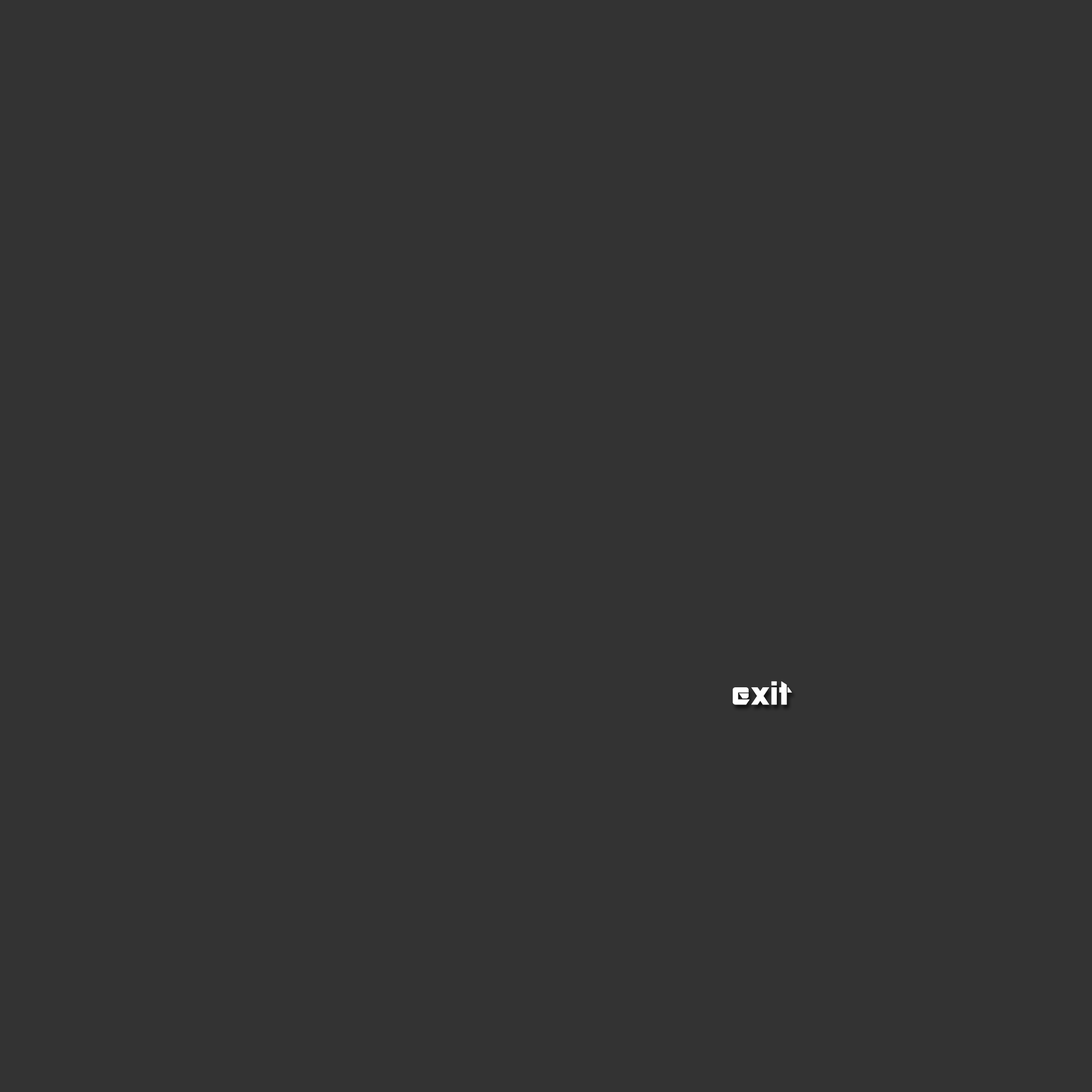
<style>
.page{position:relative;width:1092px;height:1092px;background:#333333}
.page>*{position:absolute;margin:0}
.t1{font:32px "ARDESTINE";color:#ffffff;scale:1.04 1}
</style>
<div class="page">
<p class="t1" style="left:733px;top:681px;width:59px;height:24px">exit</p>
</div>
